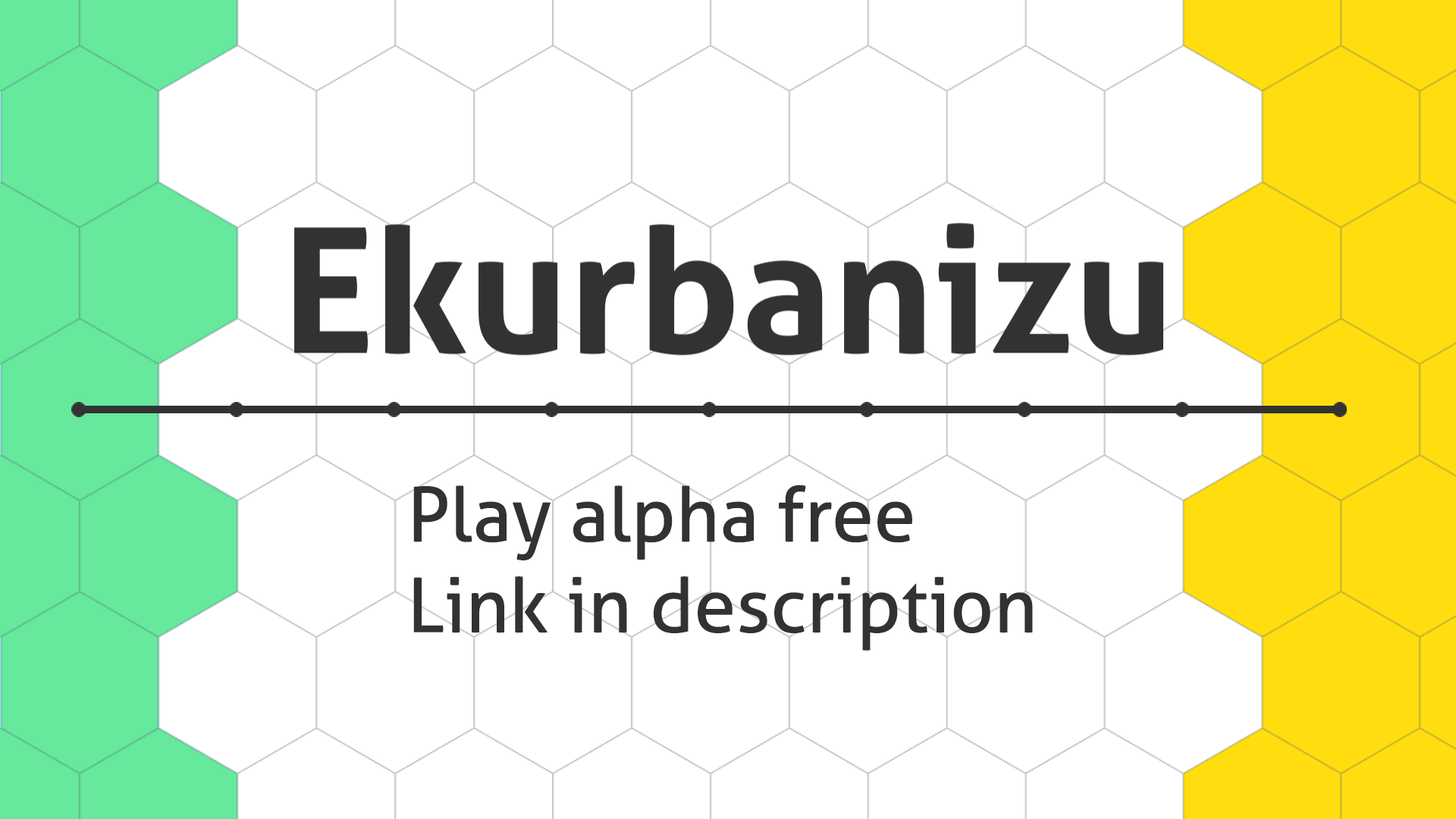
<style>
.page{position:relative;width:1456px;height:819px;background:#ffffff}
.page>*{position:absolute;margin:0}
.t1{font:75.7px "Aller";color:#323232}
</style>
<div class="page">
<p class="t1" style="left:413px;top:485px;width:620px;height:166px;text-align:right">Play alpha free<br>Link in description</p>
</div>
